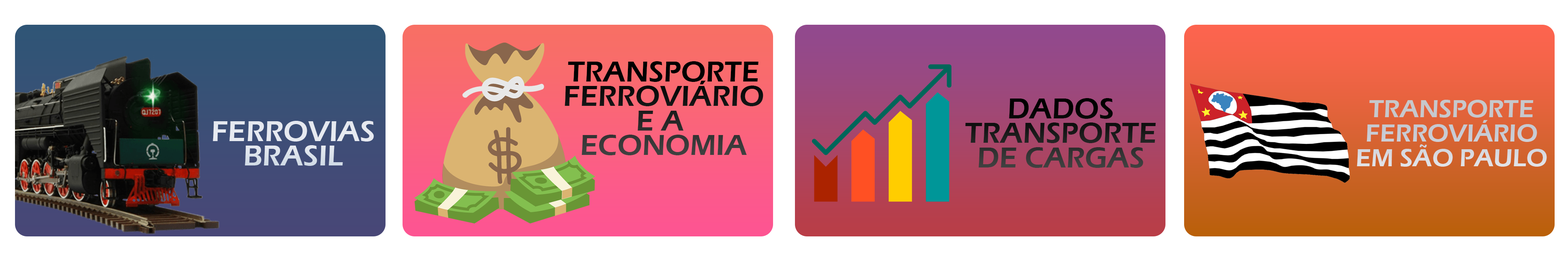
<style>
.page{position:relative;width:1568px;height:266px}
.page>*{position:absolute;margin:0}
.t1{font:29.6px/24.5px "ErasITC-Demi";color:#000000;text-transform:uppercase}
.t2{font:29.6px/24.5px "ErasITC-Demi";text-transform:uppercase}
.t3{font:25.3px/24.5px "ErasITC-Demi";color:#c8cbd3;text-transform:uppercase}
.t4{font:29.6px/24.5px "ErasITC-Demi";color:#e5e8f0;text-transform:uppercase}
</style>
<div class="page">
<p class="t1" style="left:565px;top:61px;width:198px;height:94px;text-align:center">transporte<br>ferroviário<br>e a <br>economia</p>
<p class="t2" style="left:965px;top:98px;width:191px;height:70px;text-align:center">dados<br>transporte<br>de cargas</p>
<p class="t3" style="left:1357px;top:100px;width:190px;height:67px;text-align:center">transporte<br>ferroviário<br>em são paulo</p>
<p class="t4" style="left:213px;top:121px;width:161px;height:45px;text-align:center">ferrovias<br>brasil</p>
</div>
